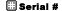
<style>
.page{position:relative;width:62px;height:11px;background:#ffffff}
.page>*{position:absolute;margin:0}
.t1{font:9px "Arial-Black";color:#000000;font-weight:bold}
</style>
<div class="page">
<p class="t1" style="left:19px;top:3px;width:39px;height:7px">Serial #</p>
</div>
